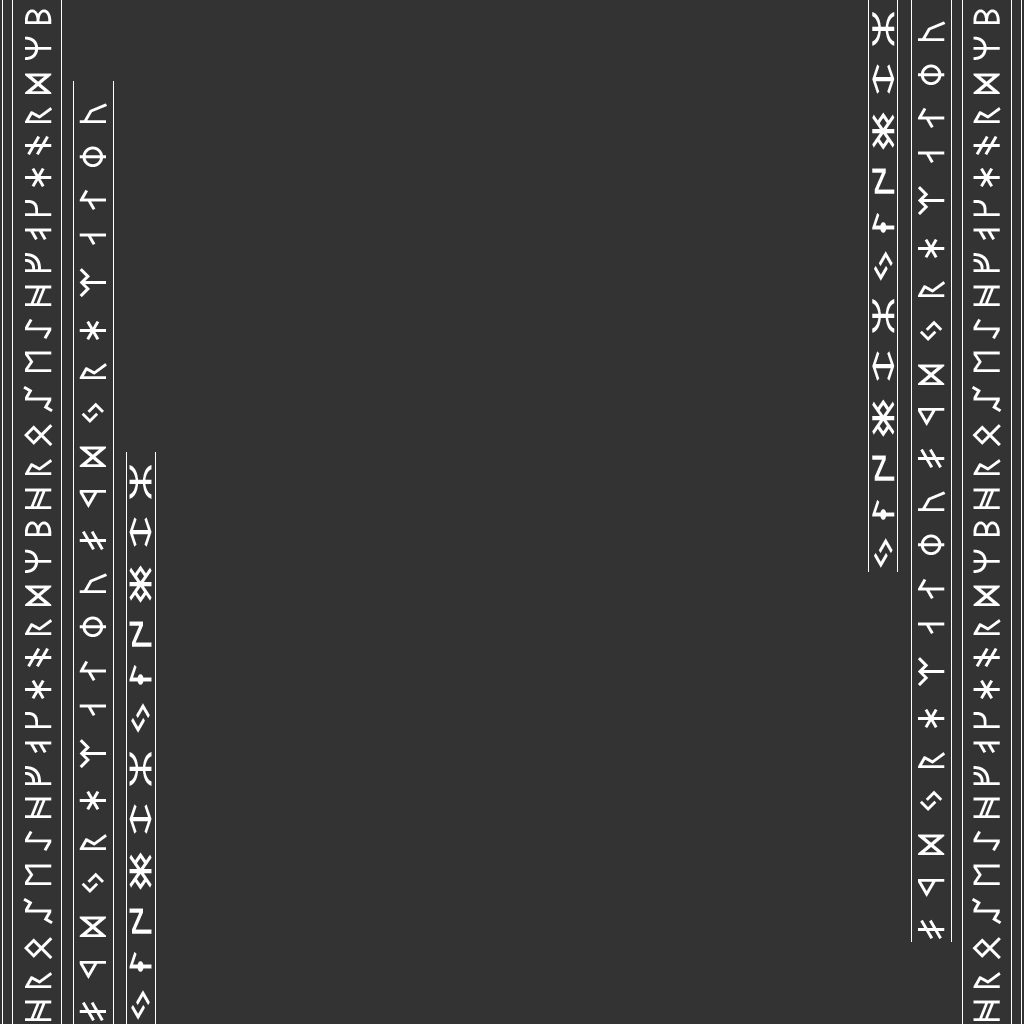
<style>
.page{position:relative;width:1024px;height:1024px;background:#333333}
.page>*{position:absolute;margin:0}
.t1{font:30px "BabelStoneRunic";letter-spacing:0.235em;color:#ffffff}
.t2{font:25px "BabelStoneRunic";letter-spacing:0.235em;color:#ffffff;scale:1.73 1}
.t3{font:30px "BabelStoneRunic";letter-spacing:0.58em;color:#ffffff}
</style>
<div class="page">
<p class="t1" style="left:23px;top:9px;width:30px;height:1012px;rotate:-90deg">ᚻᚱᛟᛢᛖᛇᚻᚠᚮᚴᚼᚬᚱᛞᛘᛒᚻᚱᛟᛢᛖᛇᚻᚠᚮᚴᚼᚬᚱᛞᛘᛒ</p>
<p class="t2" style="left:872px;top:12px;width:23px;height:556px;rotate:-90deg">ᛃᛛᛲᛤᛨᛯᛃᛛᛲᛤᛨᛯ</p>
<p class="t1" style="left:971px;top:9px;width:31px;height:1012px;rotate:-90deg">ᚻᚱᛟᛢᛖᛇᚻᚠᚮᚴᚼᚬᚱᛞᛘᛒᚻᚱᛟᛢᛖᛇᚻᚠᚮᚴᚼᚬᚱᛞᛘᛒ</p>
<p class="t3" style="left:918px;top:21px;width:28px;height:918px;rotate:-90deg">ᚯᛩᛞᛃᚱᚼᛠᛆᛮᛰᛷᚯᛩᛞᛃᚱᚼᛠᛆᛮᛰᛷ</p>
<p class="t3" style="left:79px;top:103px;width:28px;height:918px;rotate:-90deg">ᚯᛩᛞᛃᚱᚼᛠᛆᛮᛰᛷᚯᛩᛞᛃᚱᚼᛠᛆᛮᛰᛷ</p>
<p class="t2" style="left:129px;top:465px;width:23px;height:555px;rotate:-90deg">ᛃᛛᛲᛤᛨᛯᛃᛛᛲᛤᛨᛯ</p>
</div>
